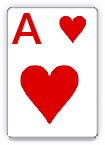
<style>
.page{position:relative;width:105px;height:145px;background:#ffffff}
.page>*{position:absolute;margin:0}
.t1{font:44px "HelveticaNeue-Medium";color:#dd0000;text-transform:uppercase}
</style>
<div class="page">
<p class="t1" style="left:11px;top:13px;width:31px;height:31px">A</p>
</div>
